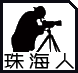
<style>
.page{position:relative;width:78px;height:73px;background:#ffffff}
.page>*{position:absolute;margin:0}
.t1{font:18px "ZHSRXT--GBK1-0";letter-spacing:0.2em;color:#000000;font-weight:bold;scale:1.14 1}
</style>
<div class="page">
<p class="t1" style="left:4px;top:53px;width:70px;height:16px">珠海人</p>
</div>
